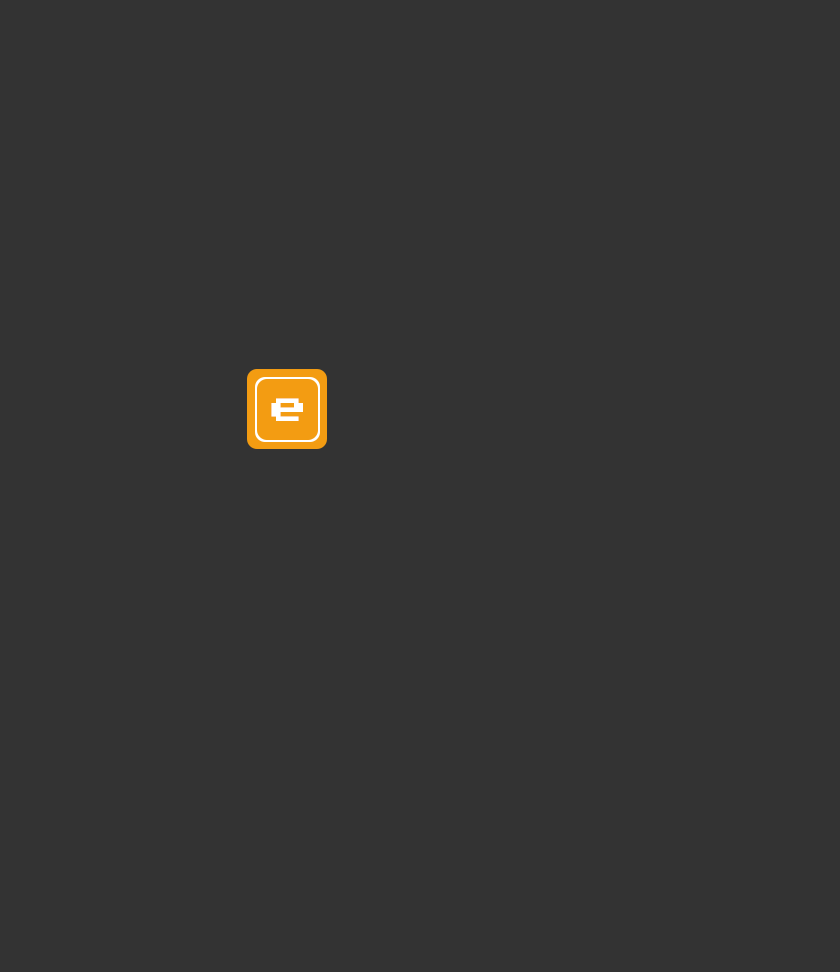
<style>
.page{position:relative;width:840px;height:972px;background:#333333}
.page>*{position:absolute;margin:0}
.t1{font:36px "PressStart2P-Regular";color:#ffffff}
</style>
<div class="page">
<p class="t1" style="left:271px;top:398px;width:32px;height:23px">e</p>
</div>
